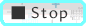
<style>
.page{position:relative;width:86px;height:26px;background:#77ffff}
.page>*{position:absolute;margin:0}
.t1{font:16px "Amira-Roman";letter-spacing:0.1em;color:#333333}
</style>
<div class="page">
<p class="t1" style="left:31px;top:6px;width:37px;height:16px">Stop</p>
</div>
